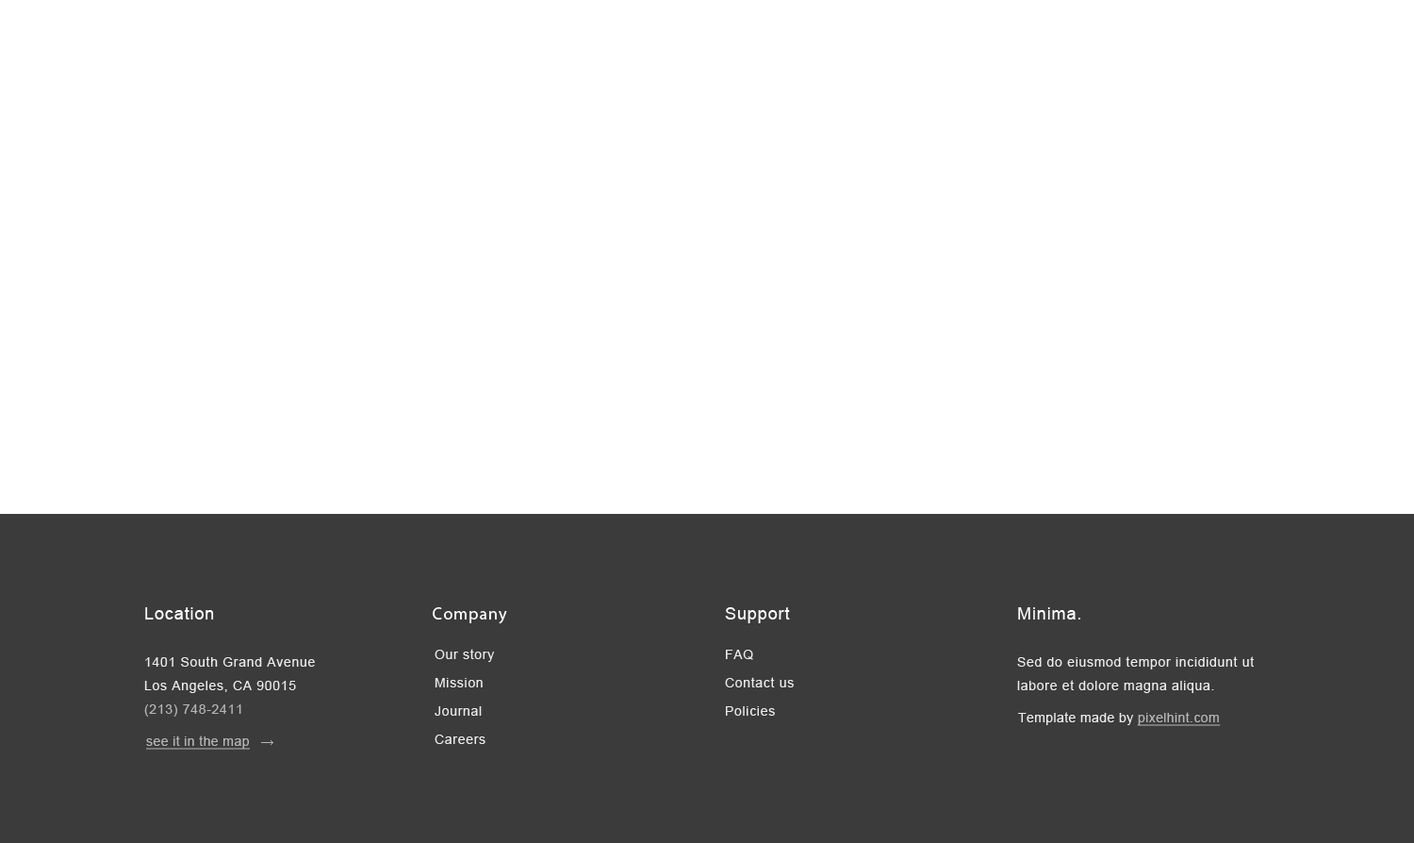
<style>
.page{position:relative;width:1414px;height:843px;background:#ffffff}
.page>*{position:absolute;margin:0}
.t1{font:13.2px/23.6px "ArialMT";letter-spacing:0.05em;color:#ebebeb}
.t2{font:17px/23.6px "ArialMT";letter-spacing:0.05em;color:#ffffff}
.t3{font:13.2px/23.6px "ArialMT";letter-spacing:0.05em;color:#b5b5b5}
.t4{font:17px "MyriadPro-Regular";letter-spacing:0.05em;color:#ffffff}
.t5{font:17px "ArialMT";letter-spacing:0.05em;color:#ffffff}
.t6{font:13.2px/28.3px "ArialMT";letter-spacing:0.05em;color:#ebebeb}
.t7{font:13.2px "ArialMT";letter-spacing:0.03em;color:#ebebeb}
.t8{font:13.2px "ArialMT";letter-spacing:0.03em;color:#b5b5b5;text-decoration:underline}
</style>
<div class="page">
<p class="t1" style="left:144px;top:607px;width:171px;height:110px"><span class="t2">Location<br><br></span>1401 South Grand Avenue <br>Los Angeles, CA 90015 <br><span class="t3">(213) 748-2411</span></p>
<p class="t4" style="left:433px;top:607px;width:74px;height:17px">Company</p>
<p class="t5" style="left:725px;top:607px;width:65px;height:16px">Support</p>
<p class="t1" style="left:1017px;top:607px;width:238px;height:86px"><span class="t2">Minima.<br><br></span>Sed do eiusmod tempor incididunt ut <br>labore et dolore magna aliqua.</p>
<p class="t6" style="left:435px;top:649px;width:60px;height:95px">Our story<br>Mission<br>Journal<br>Careers</p>
<p class="t6" style="left:725px;top:650px;width:69px;height:66px">FAQ<br>Contact us<br>Policies</p>
<p class="t7" style="left:1018px;top:712px;width:203px;height:14px">Template made by <span class="t8">pixelhint.com</span></p>
<p class="t8" style="left:146px;top:736px;width:104px;height:14px">see it in the map</p>
</div>
